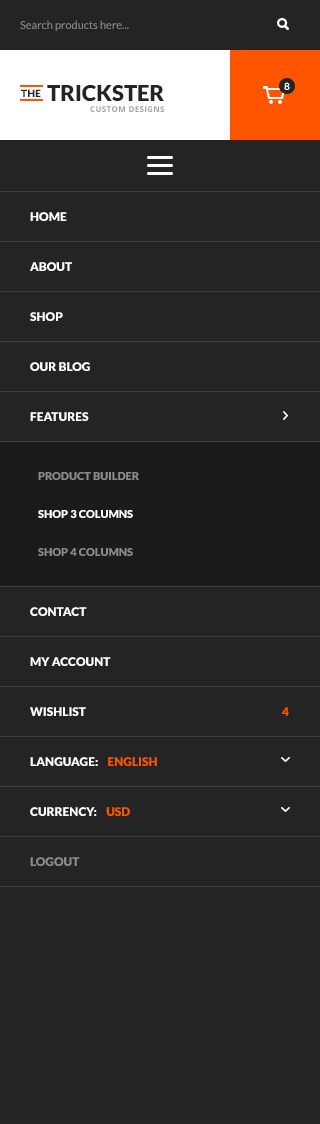
<style>
.page{position:relative;width:320px;height:1124px;background:#242424}
.page>*{position:absolute;margin:0}
.t1{font:11px "Lato-Regular";color:#8b8b8b}
.t2{font:10px "Lato-Black";letter-spacing:0.04em;color:#242424;text-transform:uppercase}
.t3{font:22px "Lato-Black";color:#242424;text-transform:uppercase}
.t4{font:10px "Lato-Bold";color:#ffffff;text-transform:uppercase}
.t5{font:8px "OpenSans-Bold";letter-spacing:0.04em;color:#a1a1a1;text-transform:uppercase}
.t6{font:12px "Lato-Black";color:#ffffff;text-transform:uppercase}
.t7{font:11px "Lato-Black";color:#8b8b8b;text-transform:uppercase}
.t8{font:11px "Lato-Black";color:#ffffff;text-transform:uppercase}
.t9{font:12px "Lato-Black";color:#ff5400;text-transform:uppercase}
.t10{font:12px "Lato-Black";color:#8b8b8b;text-transform:uppercase}
</style>
<div class="page">
<p class="t1" style="left:20px;top:20px;width:109px;height:11px">Search products here...</p>
<p class="t2" style="left:21px;top:89px;width:20px;height:8px">THE</p>
<p class="t3" style="left:47px;top:85px;width:117px;height:16px">TRICKSTER</p>
<p class="t4" style="left:284px;top:82px;width:6px;height:8px">8</p>
<p class="t5" style="left:90px;top:106px;width:75px;height:6px">CUSTOM DESIGNS</p>
<p class="t6" style="left:30px;top:212px;width:37px;height:9px">HOME</p>
<p class="t6" style="left:30px;top:262px;width:42px;height:9px">ABOUT</p>
<p class="t6" style="left:30px;top:312px;width:33px;height:9px">SHOP</p>
<p class="t6" style="left:30px;top:362px;width:60px;height:9px">OUR BLOG</p>
<p class="t6" style="left:30px;top:412px;width:59px;height:9px">FEATURES</p>
<p class="t7" style="left:38px;top:472px;width:101px;height:8px">Product Builder</p>
<p class="t8" style="left:38px;top:510px;width:95px;height:8px">Shop 3 columns</p>
<p class="t7" style="left:38px;top:548px;width:95px;height:8px">shop 4 columns</p>
<p class="t6" style="left:30px;top:607px;width:57px;height:9px">CONTACT</p>
<p class="t6" style="left:30px;top:657px;width:81px;height:9px">MY ACCOUNT</p>
<p class="t6" style="left:30px;top:707px;width:56px;height:9px">WISHLIST</p>
<p class="t9" style="left:282px;top:707px;width:7px;height:9px">4</p>
<p class="t6" style="left:30px;top:757px;width:127px;height:9px">LANGUAGE:    <span class="t9">ENGLISH</span></p>
<p class="t6" style="left:30px;top:807px;width:100px;height:9px">CURRENCY:    <span class="t9">USD</span></p>
<p class="t10" style="left:30px;top:857px;width:50px;height:9px">LOGOUT</p>
</div>
